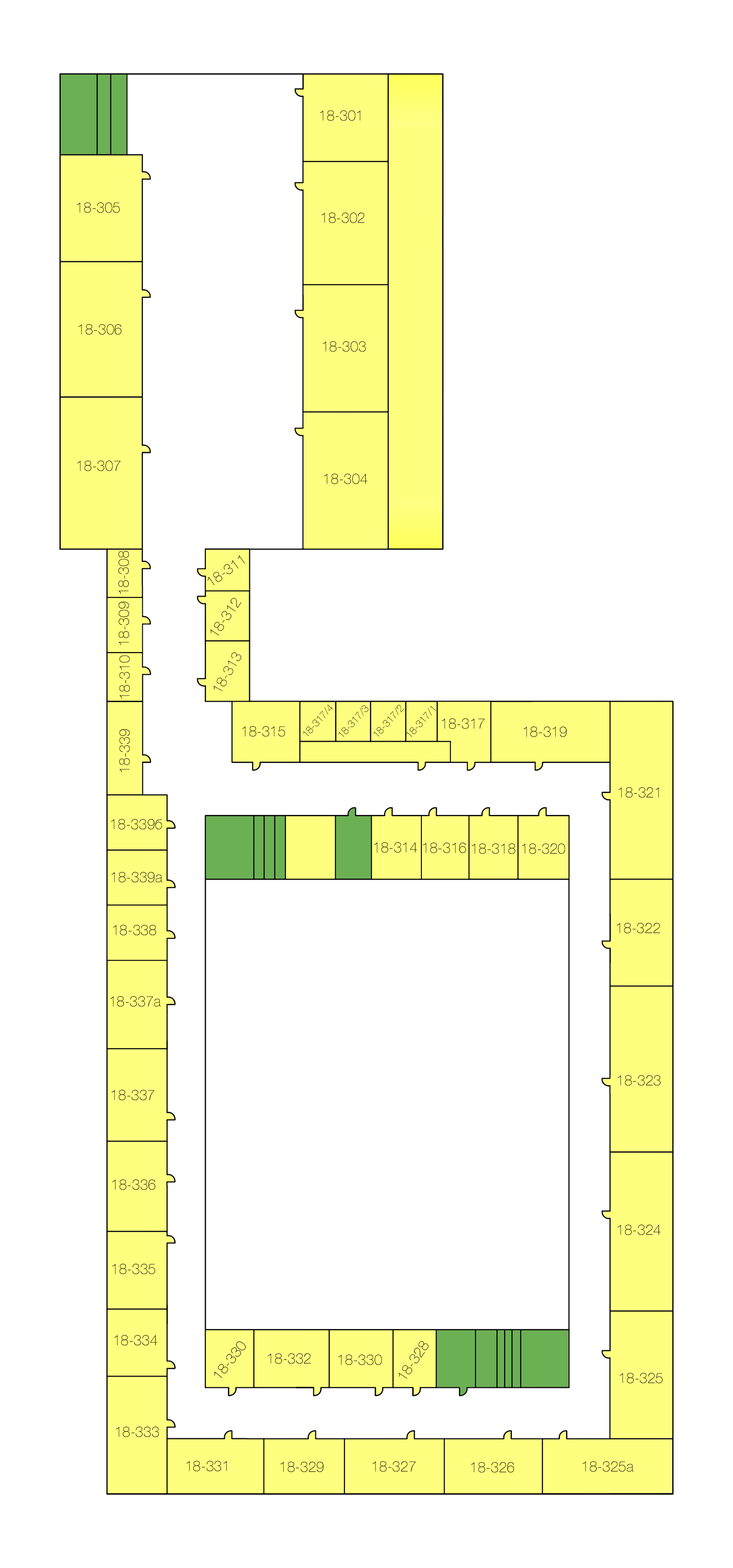
<style>
.page{position:relative;width:733px;height:1568px;background:#ffffff}
.page>*{position:absolute;margin:0}
.t1{font:14.4px "HelveticaNeue-Thin";color:#000000}
.t2{font:10.2px "HelveticaNeue-Thin";color:#000000}
</style>
<div class="page">
<p class="t1" style="left:320px;top:110px;width:40px;height:11px">18-301</p>
<p class="t1" style="left:77px;top:202px;width:43px;height:11px">18-305</p>
<p class="t1" style="left:322px;top:213px;width:43px;height:10px">18-302</p>
<p class="t1" style="left:79px;top:324px;width:43px;height:11px">18-306</p>
<p class="t1" style="left:323px;top:341px;width:43px;height:11px">18-303</p>
<p class="t1" style="left:77px;top:461px;width:44px;height:10px">18-307</p>
<p class="t1" style="left:324px;top:474px;width:44px;height:10px">18-304</p>
<p class="t1" style="left:118px;top:551px;width:11px;height:43px;rotate:-90deg">18-308</p>
<p class="t1" style="left:207px;top:555px;width:38px;height:30px;rotate:-36deg">18-311</p>
<p class="t1" style="left:119px;top:602px;width:10px;height:44px;rotate:-90deg">18-309</p>
<p class="t1" style="left:210px;top:598px;width:32px;height:38px;rotate:-56deg">18-312</p>
<p class="t1" style="left:213px;top:652px;width:29px;height:39px;rotate:-60deg">18-313</p>
<p class="t1" style="left:119px;top:655px;width:11px;height:43px;rotate:-90deg">18-310</p>
<p class="t2" style="left:303px;top:705px;width:30px;height:31px;rotate:-48deg">18-317/4</p>
<p class="t2" style="left:338px;top:705px;width:31px;height:32px;rotate:-48deg">18-317/3</p>
<p class="t2" style="left:373px;top:705px;width:31px;height:32px;rotate:-48deg">18-317/2</p>
<p class="t2" style="left:406px;top:706px;width:30px;height:31px;rotate:-48deg">18-317/1</p>
<p class="t1" style="left:442px;top:718px;width:43px;height:11px">18-317</p>
<p class="t1" style="left:119px;top:729px;width:11px;height:43px;rotate:-90deg">18-339</p>
<p class="t1" style="left:242px;top:726px;width:43px;height:11px">18-315</p>
<p class="t1" style="left:524px;top:727px;width:43px;height:10px">18-319</p>
<p class="t1" style="left:619px;top:787px;width:40px;height:11px">18-321</p>
<p class="t1" style="left:111px;top:819px;width:51px;height:11px">18-339б</p>
<p class="t1" style="left:374px;top:842px;width:43px;height:11px">18-314</p>
<p class="t1" style="left:423px;top:843px;width:43px;height:10px">18-316</p>
<p class="t1" style="left:472px;top:843px;width:44px;height:11px">18-318</p>
<p class="t1" style="left:522px;top:843px;width:43px;height:11px">18-320</p>
<p class="t1" style="left:112px;top:872px;width:51px;height:11px">18-339а</p>
<p class="t1" style="left:113px;top:925px;width:43px;height:11px">18-338</p>
<p class="t1" style="left:617px;top:923px;width:43px;height:10px">18-322</p>
<p class="t1" style="left:110px;top:996px;width:51px;height:11px">18-337а</p>
<p class="t1" style="left:618px;top:1075px;width:43px;height:11px">18-323</p>
<p class="t1" style="left:112px;top:1090px;width:42px;height:10px">18-337</p>
<p class="t1" style="left:112px;top:1179px;width:44px;height:11px">18-336</p>
<p class="t1" style="left:618px;top:1225px;width:43px;height:10px">18-324</p>
<p class="t1" style="left:112px;top:1264px;width:43px;height:10px">18-335</p>
<p class="t1" style="left:114px;top:1335px;width:44px;height:11px">18-334</p>
<p class="t1" style="left:214px;top:1341px;width:32px;height:37px;rotate:-52deg">18-330</p>
<p class="t1" style="left:399px;top:1341px;width:30px;height:38px;rotate:-56deg">18-328</p>
<p class="t1" style="left:268px;top:1353px;width:43px;height:11px">18-332</p>
<p class="t1" style="left:338px;top:1355px;width:44px;height:10px">18-330</p>
<p class="t1" style="left:620px;top:1373px;width:43px;height:11px">18-325</p>
<p class="t1" style="left:116px;top:1427px;width:43px;height:10px">18-333</p>
<p class="t1" style="left:187px;top:1461px;width:40px;height:10px">18-331</p>
<p class="t1" style="left:281px;top:1462px;width:43px;height:10px">18-329</p>
<p class="t1" style="left:373px;top:1461px;width:43px;height:11px">18-327</p>
<p class="t1" style="left:471px;top:1462px;width:43px;height:11px">18-326</p>
<p class="t1" style="left:583px;top:1461px;width:51px;height:11px">18-325а</p>
</div>
